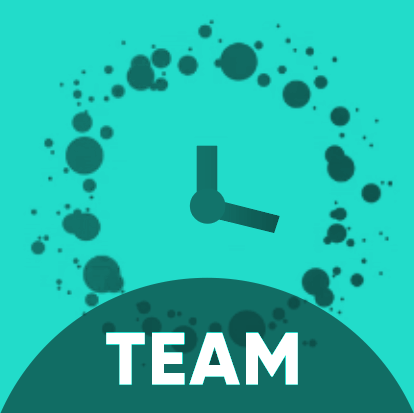
<style>
.page{position:relative;width:414px;height:413px;background:#22dcca}
.page>*{position:absolute;margin:0}
.t1{font:73.7px "Gilroy-ExtraBold";letter-spacing:0.03em;color:#ffffff}
</style>
<div class="page">
<p class="t1" style="left:106px;top:332px;width:192px;height:53px">TEAM</p>
</div>
